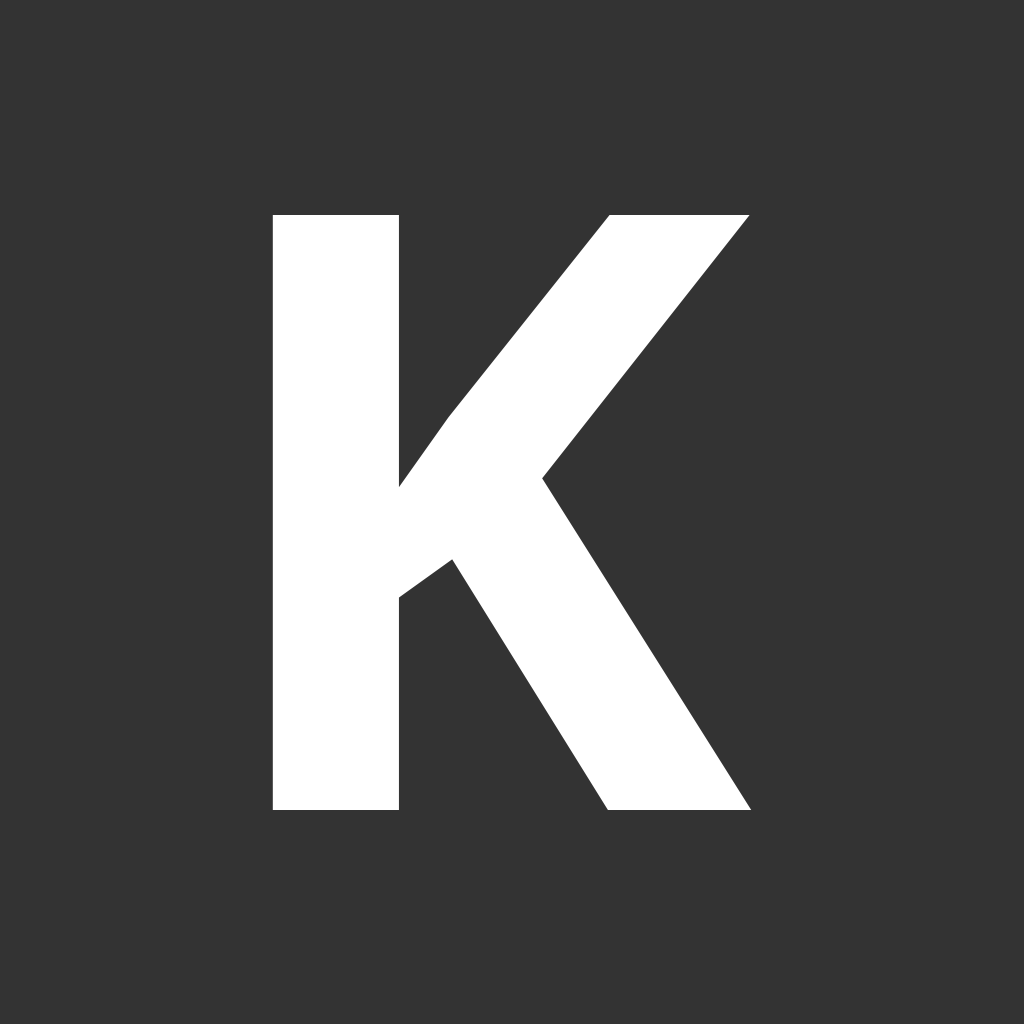
<style>
.page{position:relative;width:1024px;height:1024px;background:#333333}
.page>*{position:absolute;margin:0}
.t1{font:833.3px "OpenSans-Bold";letter-spacing:0.025em;color:#ffffff}
</style>
<div class="page">
<p class="t1" style="left:272px;top:215px;width:480px;height:595px">K</p>
</div>
